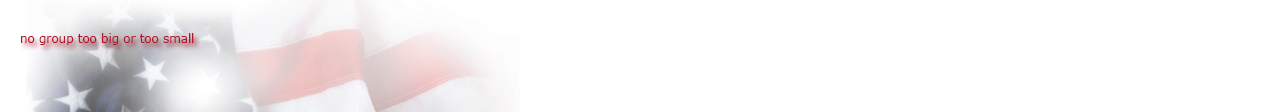
<style>
.page{position:relative;width:1280px;height:112px;background:#ffffff}
.page>*{position:absolute;margin:0}
.t1{font:12px "Verdana";letter-spacing:-0.005em;color:#b3152c}
</style>
<div class="page">
<p class="t1" style="left:21px;top:33px;width:173px;height:12px">no group too big or too small</p>
</div>
